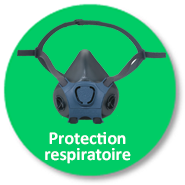
<style>
.page{position:relative;width:185px;height:185px;background:#00cc66}
.page>*{position:absolute;margin:0}
.t1{font:18px/16px "Calibri-Bold";color:#ffffff}
</style>
<div class="page">
<p class="t1" style="left:45px;top:132px;width:86px;height:32px;text-align:center">Protection  <br>respiratoire</p>
</div>
